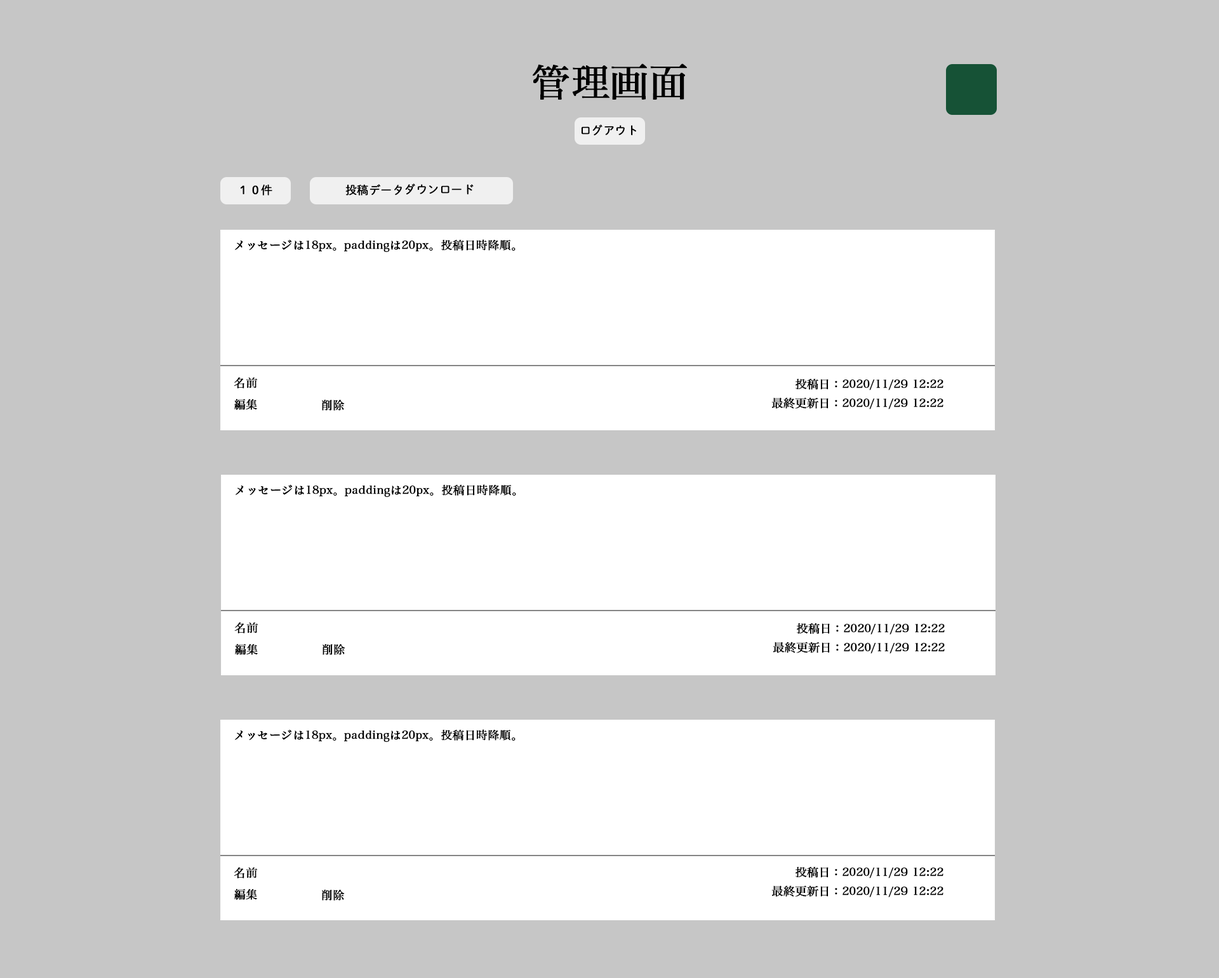
<style>
.page{position:relative;width:1219px;height:978px;background:#c6c6c6}
.page>*{position:absolute;margin:0}
.t1{font:38.1px "HiraMinPro-W3";color:#000000;font-weight:bold}
.t2{font:11.4px "DNPShueiMGoStd-L";color:#000000;font-weight:bold}
.t3{font:11.4px "HiraMinPro-W3";color:#000000;font-weight:bold}
</style>
<div class="page">
<p class="t1" style="left:533px;top:63px;width:154px;height:37px">管理画面</p>
<p class="t2" style="left:581px;top:124px;width:55px;height:12px">ログアウト</p>
<p class="t2" style="left:240px;top:184px;width:32px;height:12px">１０件</p>
<p class="t2" style="left:345px;top:183px;width:129px;height:13px">投稿データダウンロード</p>
<p class="t3" style="left:235px;top:239px;width:280px;height:13px">メッセージは18px。paddingは20px。投稿日時降順。</p>
<p class="t3" style="left:234px;top:377px;width:24px;height:12px">名前</p>
<p class="t3" style="left:795px;top:378px;width:148px;height:12px">投稿日：2020/11/29 12:22</p>
<p class="t3" style="left:234px;top:399px;width:23px;height:11px">編集</p>
<p class="t3" style="left:322px;top:399px;width:23px;height:12px">削除</p>
<p class="t3" style="left:771px;top:397px;width:172px;height:12px">最終更新日：2020/11/29 12:22</p>
<p class="t3" style="left:236px;top:484px;width:280px;height:13px">メッセージは18px。paddingは20px。投稿日時降順。</p>
<p class="t3" style="left:234px;top:622px;width:24px;height:12px">名前</p>
<p class="t3" style="left:797px;top:623px;width:148px;height:12px">投稿日：2020/11/29 12:22</p>
<p class="t3" style="left:773px;top:642px;width:172px;height:12px">最終更新日：2020/11/29 12:22</p>
<p class="t3" style="left:235px;top:644px;width:23px;height:11px">編集</p>
<p class="t3" style="left:322px;top:644px;width:23px;height:11px">削除</p>
<p class="t3" style="left:235px;top:729px;width:280px;height:13px">メッセージは18px。paddingは20px。投稿日時降順。</p>
<p class="t3" style="left:234px;top:867px;width:24px;height:12px">名前</p>
<p class="t3" style="left:795px;top:867px;width:148px;height:12px">投稿日：2020/11/29 12:22</p>
<p class="t3" style="left:234px;top:889px;width:23px;height:11px">編集</p>
<p class="t3" style="left:322px;top:889px;width:23px;height:12px">削除</p>
<p class="t3" style="left:771px;top:886px;width:172px;height:12px">最終更新日：2020/11/29 12:22</p>
</div>
